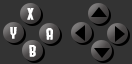
<style>
.page{position:relative;width:132px;height:64px;background:#333333}
.page>*{position:absolute;margin:0}
.t1{font:14px "Splatoon2";color:#ffffff}
</style>
<div class="page">
<p class="t1" style="left:27px;top:8px;width:7px;height:12px">X</p>
<p class="t1" style="left:10px;top:27px;width:7px;height:12px">Y</p>
<p class="t1" style="left:46px;top:28px;width:7px;height:12px">A</p>
<p class="t1" style="left:29px;top:45px;width:7px;height:12px">B</p>
</div>
